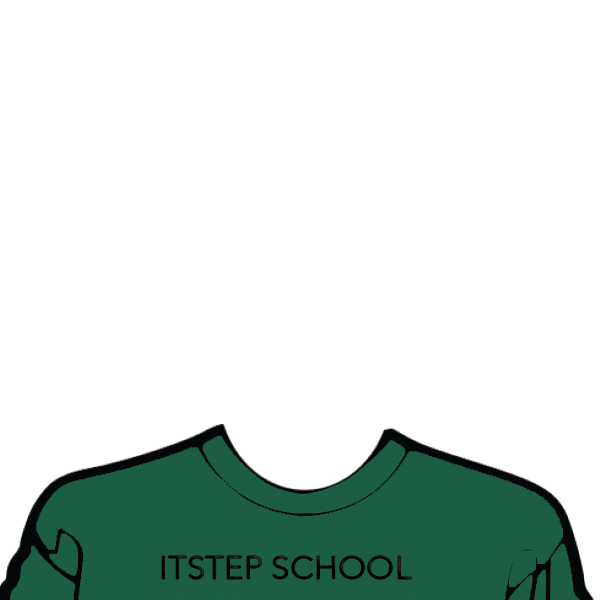
<style>
.page{position:relative;width:600px;height:600px;background:#ffffff}
.page>*{position:absolute;margin:0}
.t1{font:33.3px "AvenirNext-Regular";color:#010101}
</style>
<div class="page">
<p class="t1" style="left:162px;top:556px;width:250px;height:23px">ITSTEP SCHOOL</p>
</div>
